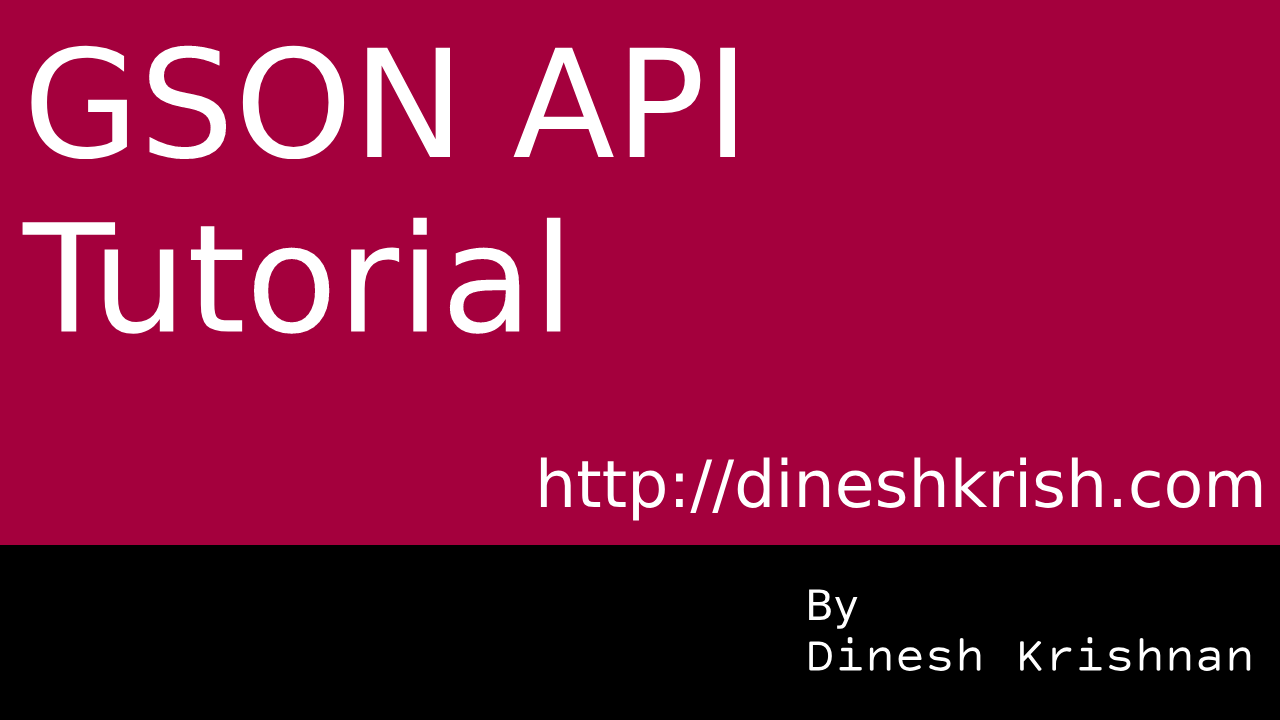
<style>
.page{position:relative;width:1280px;height:720px;background:#a4003d}
.page>*{position:absolute;margin:0}
.t1{font:150px "DejaVuSans";color:#ffffff}
.t2{font:65px "DejaVuSans";color:#ffffff}
.t3{font:50px "CourierPrimeSans-Regular";color:#ffffff}
.t4{font:42px "DejaVuSans";color:#ffffff}
</style>
<div class="page">
<p class="t1" style="left:22px;top:45px;width:713px;height:289px">GSON API<br>Tutorial</p>
<p class="t2" style="left:540px;top:457px;width:722px;height:64px">http://dineshkrish.com</p>
<p class="t3" style="left:809px;top:589px;width:442px;height:82px"><span class="t4">By<br></span>Dinesh Krishnan</p>
</div>
